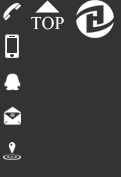
<style>
.page{position:relative;width:121px;height:177px;background:#333333}
.page>*{position:absolute;margin:0}
.t1{font:18px "MongolianBaiti";color:#ffffff}
</style>
<div class="page">
<p class="t1" style="left:31px;top:16px;width:33px;height:14px">TOP</p>
</div>
